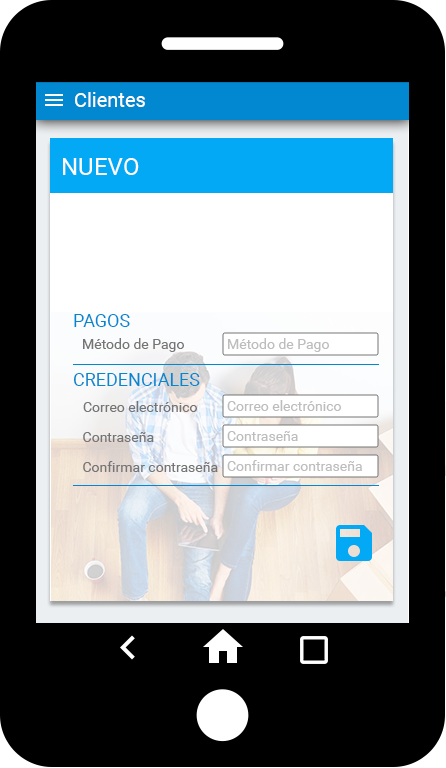
<style>
.page{position:relative;width:446px;height:768px;background:#000000}
.page>*{position:absolute;margin:0}
.t1{font:20px "Roboto-Regular";color:#ffffff}
.t2{font:24px "Roboto-Regular";color:#ffffff}
.t3{font:18px "Roboto-Regular";color:#0288d1}
.t4{font:14px "Roboto-Regular";color:#757575}
.t5{font:14px "Roboto-Regular";color:#bdbdbd}
</style>
<div class="page">
<p class="t1" style="left:75px;top:92px;width:70px;height:15px">Clientes</p>
<p class="t2" style="left:63px;top:158px;width:76px;height:17px">NUEVO</p>
<p class="t3" style="left:74px;top:314px;width:56px;height:13px">PAGOS</p>
<p class="t4" style="left:83px;top:338px;width:101px;height:14px">Método de Pago</p>
<p class="t5" style="left:228px;top:338px;width:101px;height:14px">Método de Pago</p>
<p class="t3" style="left:73px;top:373px;width:127px;height:13px">CREDENCIALES</p>
<p class="t4" style="left:83px;top:401px;width:114px;height:11px">Correo electrónico</p>
<p class="t5" style="left:227px;top:400px;width:114px;height:11px">Correo electrónico</p>
<p class="t4" style="left:83px;top:432px;width:71px;height:10px">Contraseña</p>
<p class="t5" style="left:227px;top:431px;width:71px;height:10px">Contraseña</p>
<p class="t4" style="left:83px;top:461px;width:135px;height:11px">Confirmar contraseña</p>
<p class="t5" style="left:227px;top:460px;width:135px;height:11px">Confirmar contraseña</p>
</div>
